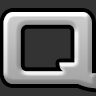
<style>
.page{position:relative;width:96px;height:96px;background:#333333}
.page>*{position:absolute;margin:0}
.t1{font:98.6px "JefferiesExtended";scale:0.85 1}
</style>
<div class="page">
<p class="t1" style="left:3px;top:12px;width:94px;height:77px">Q</p>
</div>
